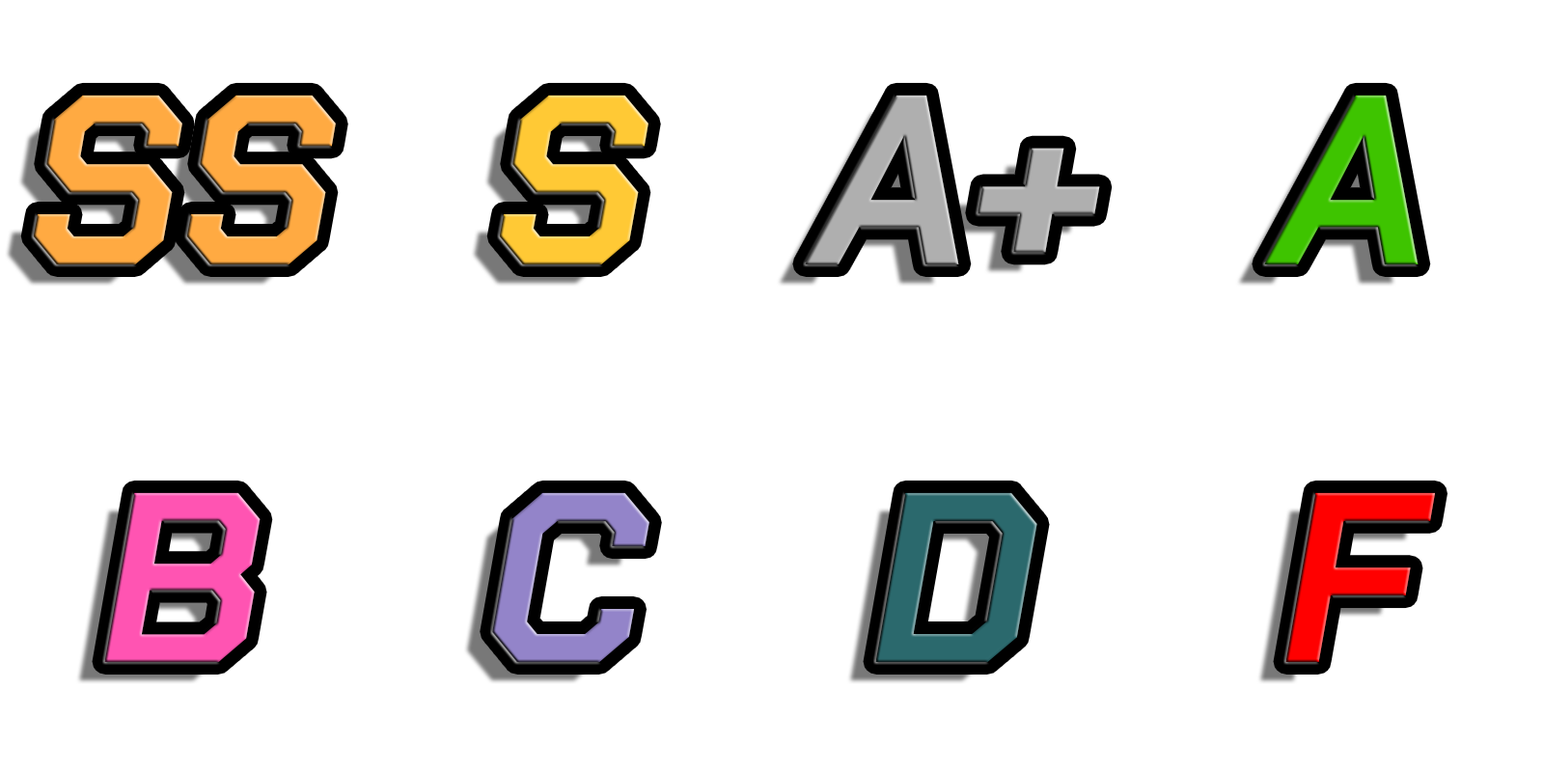
<style>
.page{position:relative;width:1544px;height:772px;background:#ffffff}
.page>*{position:absolute;margin:0}
.t1{font:241.3px "ChakraPetch-BoldItalic";color:#ffaa42}
.t2{font:241.3px "ChakraPetch-BoldItalic";color:#ffc935}
.t3{font:241.3px "ChakraPetch-BoldItalic";color:#3ec400}
.t4{font:241.3px "ChakraPetch-BoldItalic";color:#ff54b2}
.t5{font:241.3px "ChakraPetch-BoldItalic";color:#ff0000}
</style>
<div class="page">
<p class="t1" style="left:33px;top:95px;width:303px;height:169px">SS</p>
<p class="t2" style="left:499px;top:95px;width:150px;height:169px">S</p>
<p class="t3" style="left:1264px;top:95px;width:155px;height:169px">A</p>
<p class="t4" style="left:104px;top:492px;width:157px;height:170px">B</p>
<p class="t5" style="left:1286px;top:492px;width:149px;height:170px">F</p>
</div>
